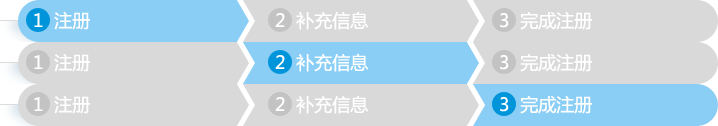
<style>
.page{position:relative;width:718px;height:126px;background:#d9d9d9}
.page>*{position:absolute;margin:0}
.t1{font:18px "MicrosoftYaHei";color:#ffffff}
</style>
<div class="page">
<p class="t1" style="left:34px;top:11px;width:56px;height:19px">1  注册</p>
<p class="t1" style="left:275px;top:11px;width:94px;height:19px">2  补充信息</p>
<p class="t1" style="left:500px;top:11px;width:92px;height:19px">3  完成注册</p>
<p class="t1" style="left:34px;top:53px;width:56px;height:19px">1  注册</p>
<p class="t1" style="left:275px;top:53px;width:94px;height:19px">2  补充信息</p>
<p class="t1" style="left:500px;top:53px;width:92px;height:19px">3  完成注册</p>
<p class="t1" style="left:34px;top:95px;width:56px;height:19px">1  注册</p>
<p class="t1" style="left:275px;top:95px;width:94px;height:19px">2  补充信息</p>
<p class="t1" style="left:500px;top:95px;width:92px;height:19px">3  完成注册</p>
</div>
